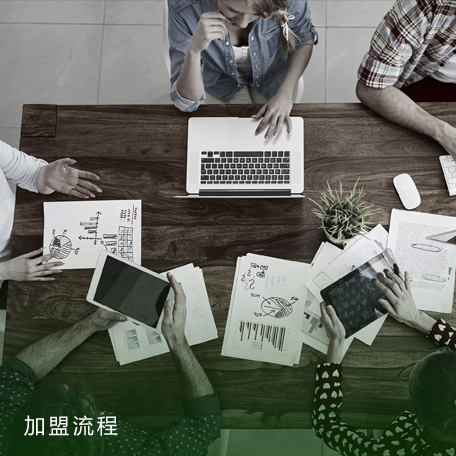
<style>
.page{position:relative;width:456px;height:456px}
.page>*{position:absolute;margin:0}
.t1{font:21px "MicrosoftYaHei";letter-spacing:0.16em;color:#ffffff}
</style>
<div class="page">
<p class="t1" style="left:24px;top:415px;width:94px;height:21px">加盟流程</p>
</div>
